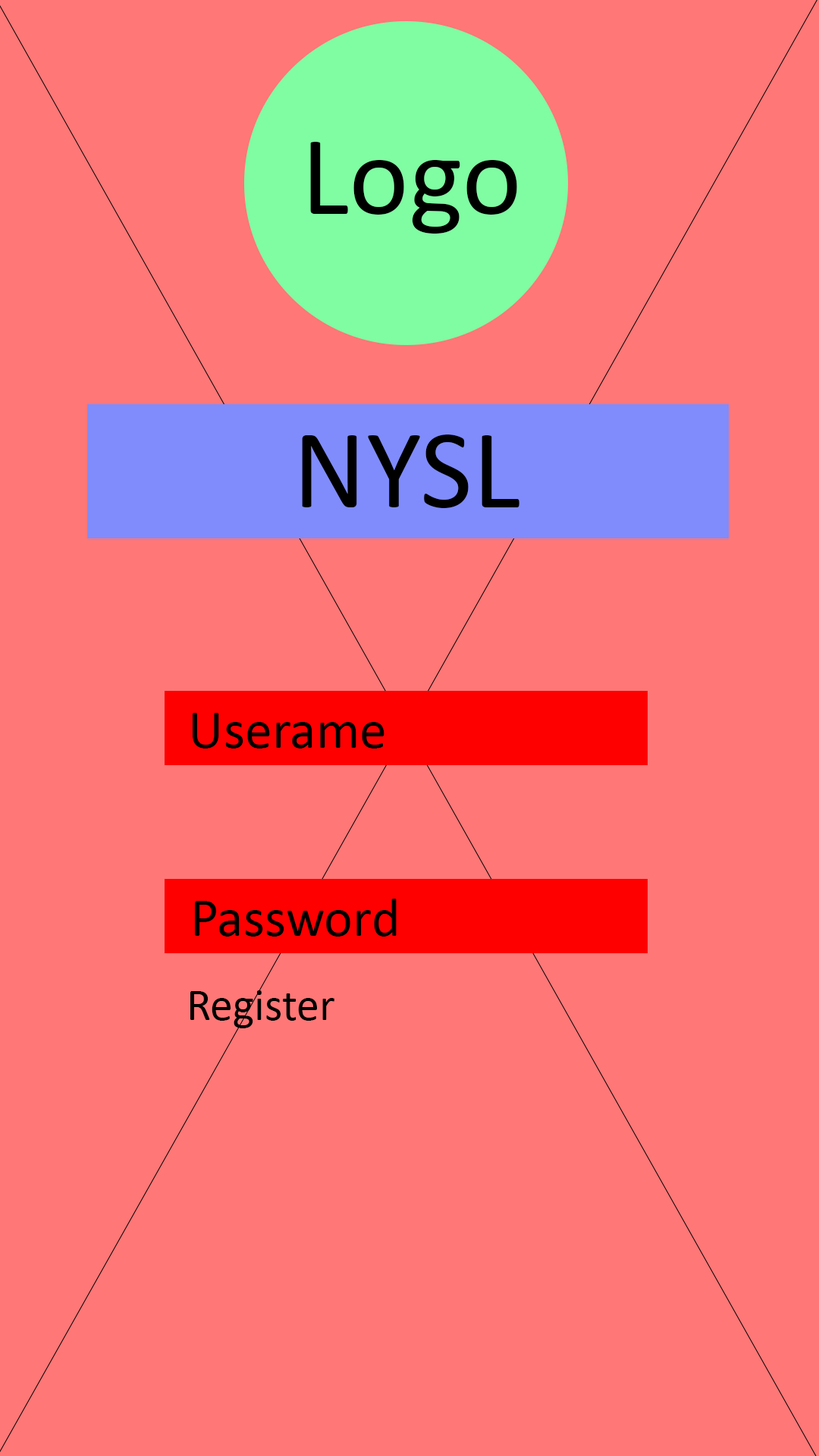
<style>
.page{position:relative;width:819px;height:1456px;background:#ff7777}
.page>*{position:absolute;margin:0}
.t1{font:113.7px "Calibri";color:#000000}
.t2{font:54.6px "Calibri";color:#000000}
.t3{font:45.5px "Calibri";color:#000000}
</style>
<div class="page">
<p class="t1" style="left:310px;top:142px;width:207px;height:92px">Logo</p>
<p class="t1" style="left:302px;top:435px;width:217px;height:73px">NYSL</p>
<p class="t2" style="left:193px;top:713px;width:191px;height:35px">Userame</p>
<p class="t2" style="left:195px;top:899px;width:202px;height:38px">Password</p>
<p class="t3" style="left:190px;top:990px;width:144px;height:38px">Register</p>
</div>
